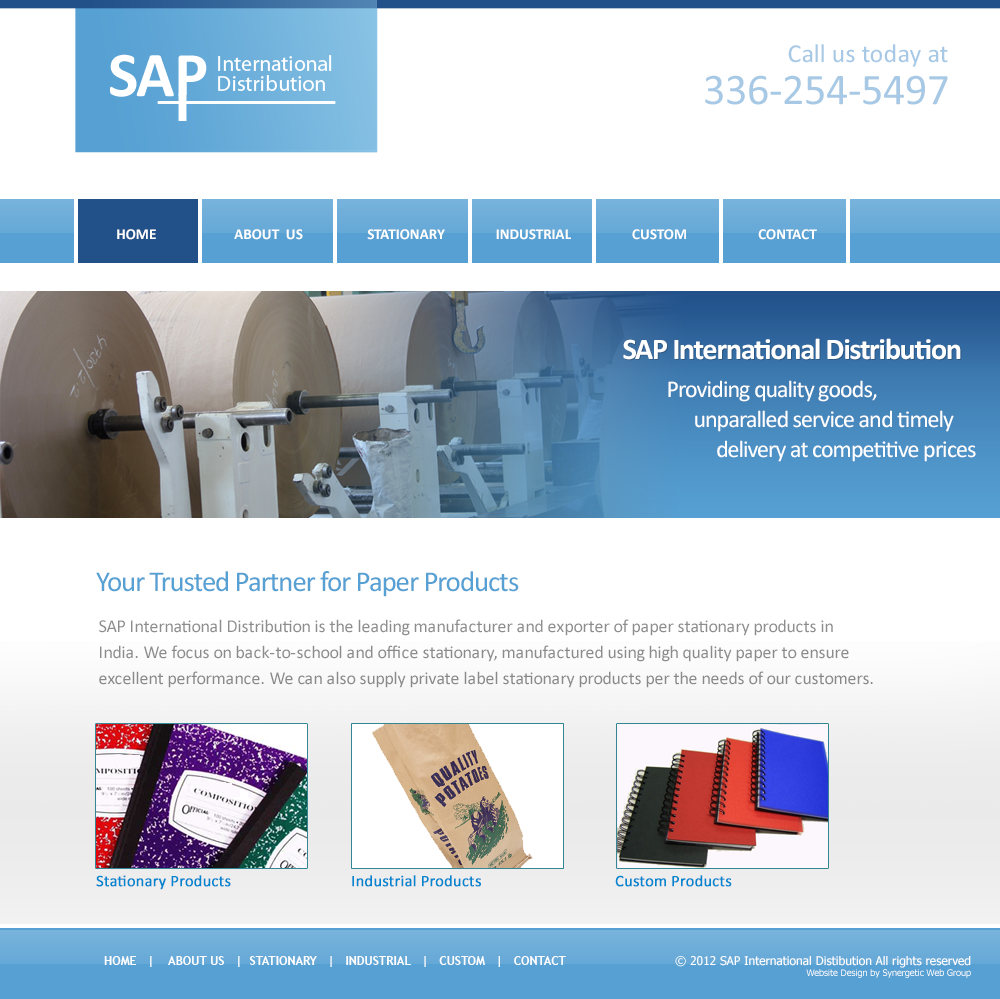
<style>
.page{position:relative;width:1000px;height:999px;background:#ffffff}
.page>*{position:absolute;margin:0}
.t1{font:26px/26.2px "Calibri";color:#a7c9e5}
.t2{font:44px/42.2px "Calibri";color:#a7c9e5}
.t3{font:15px "Calibri-Bold";color:#ffffff;text-transform:uppercase}
.t4{font:30px "Calibri-Bold";letter-spacing:-0.04em;color:#ffffff}
.t5{font:24px/30.2px "Calibri";letter-spacing:-0.04em;color:#ffffff}
.t6{font:29.1px "Calibri";letter-spacing:-0.04em;color:#56a0d3}
.t7{font:18px/26.2px "Calibri";color:#8b8b8b}
.t8{font:16px "Calibri";color:#0085cf;font-weight:bold}
.t9{font:12px "TrebuchetMS-Bold";color:#ffffff}
.t10{font:12px "Tahoma";color:#ffffff}
.t11{font:9px "Tahoma";color:#ffffff}
</style>
<div class="page">
<p class="t1" style="left:705px;top:44px;width:243px;height:61px;text-align:right">Call us today at <br><span class="t2">336-254-5497</span></p>
<p class="t3" style="left:117px;top:229px;width:700px;height:11px">HOME                       about  us                   stationary               industrial Custom                     Contact</p>
<p class="t4" style="left:623px;top:338px;width:338px;height:22px">SAP International Distribution</p>
<p class="t5" style="left:668px;top:380px;width:308px;height:82px">Providing quality goods, <br>      unparalled service and timely <br>           delivery at competitive prices</p>
<p class="t6" style="left:96px;top:571px;width:423px;height:26px">Your Trusted Partner for Paper Products</p>
<p class="t7" style="left:99px;top:619px;width:774px;height:69px">SAP International Distribution is the leading manufacturer and exporter of paper stationary products in <br>India. We focus on back-to-school and office stationary, manufactured using high quality paper to ensure excellent performance. We can also supply private label stationary products per the needs of our customers.</p>
<p class="t8" style="left:96px;top:875px;width:135px;height:15px">Stationary Products</p>
<p class="t8" style="left:352px;top:875px;width:129px;height:12px">Industrial Products</p>
<p class="t8" style="left:615px;top:875px;width:117px;height:12px">Custom Products</p>
<p class="t9" style="left:104px;top:956px;width:462px;height:11px">HOME   |    ABOUT US   |  STATIONARY   |   INDUSTRIAL   |   CUSTOM   |   CONTACT</p>
<p class="t10" style="left:675px;top:956px;width:296px;height:22px;text-align:right">© 2012 SAP International Distibution All rights reserved<br><span class="t11">Website Design by Synergetic Web Group</span></p>
</div>
